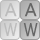
<style>
.page{position:relative;width:40px;height:40px}
.page>*{position:absolute;margin:0}
.t1{font:18px "MalgunGothicRegular";color:#bcbcbc}
.t2{font:18px "MalgunGothicRegular";color:#666666}
.t3{font:18px "MalgunGothicRegular";color:#bcbcbc;scale:0.8 1}
.t4{font:18px "MalgunGothicRegular";color:#666666;scale:0.8 1}
</style>
<div class="page">
<p class="t1" style="left:4px;top:3px;width:13px;height:14px">A</p>
<p class="t2" style="left:24px;top:3px;width:13px;height:14px">A</p>
<p class="t3" style="left:3px;top:23px;width:14px;height:13px">W</p>
<p class="t4" style="left:23px;top:23px;width:15px;height:14px">W</p>
</div>
